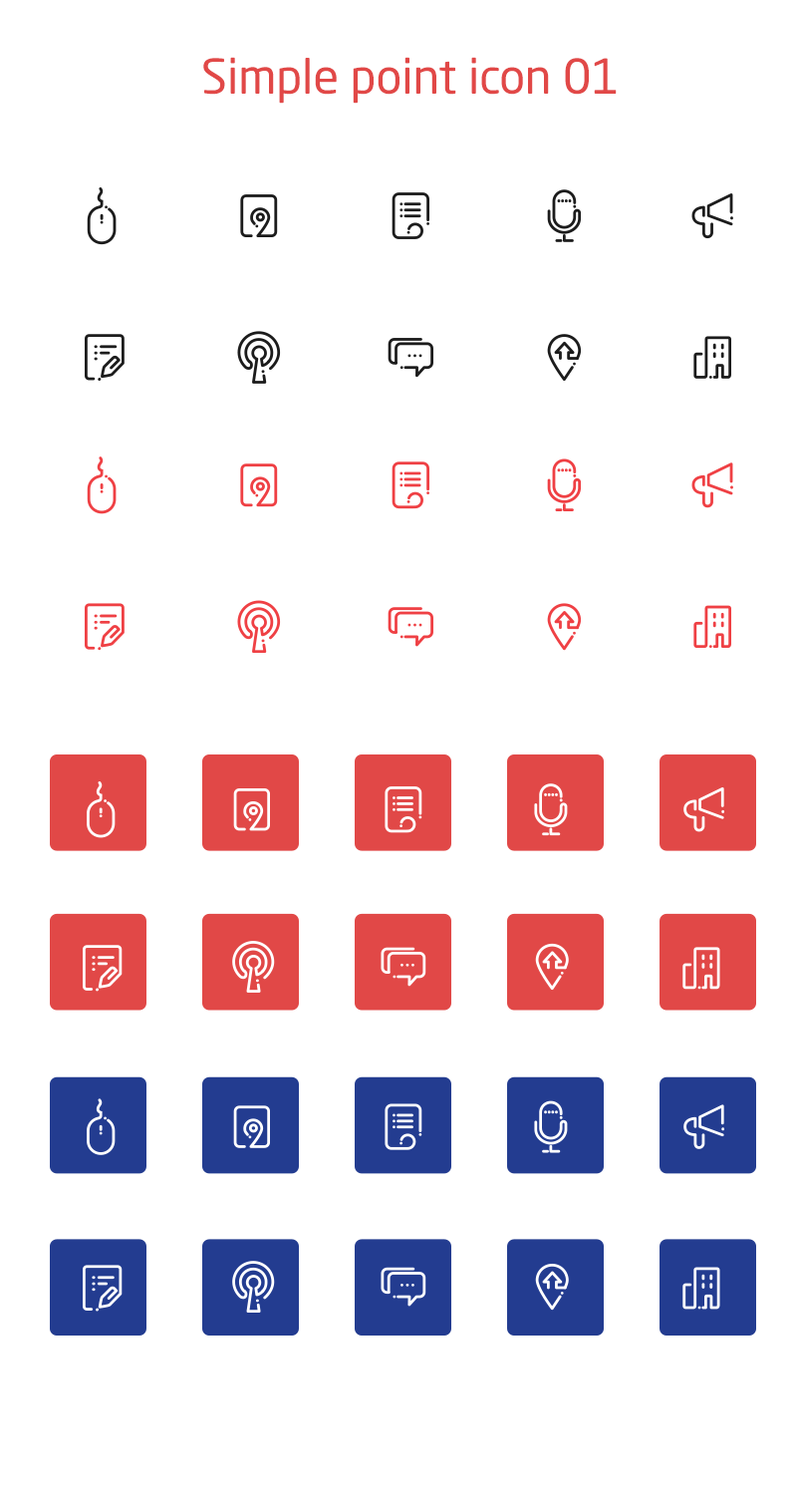
<style>
.page{position:relative;width:797px;height:1495px;background:#ffffff}
.page>*{position:absolute;margin:0}
.t1{font:47.7px "NeoSansPro-Regular";letter-spacing:-0.005em;color:#e14847}
</style>
<div class="page">
<p class="t1" style="left:203px;top:57px;width:414px;height:47px">Simple point icon 01</p>
</div>
